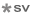
<style>
.page{position:relative;width:32px;height:16px;background:#ffffff}
.page>*{position:absolute;margin:0}
.t1{font:29.2px "ArialMT";color:#878686}
.t2{font:12.5px "ArialMT";color:#616161;scale:1.3 1}
</style>
<div class="page">
<p class="t1" style="left:1px;top:3px;width:11px;height:10px">*</p>
<p class="t2" style="left:13px;top:5px;width:17px;height:7px">sv</p>
</div>
